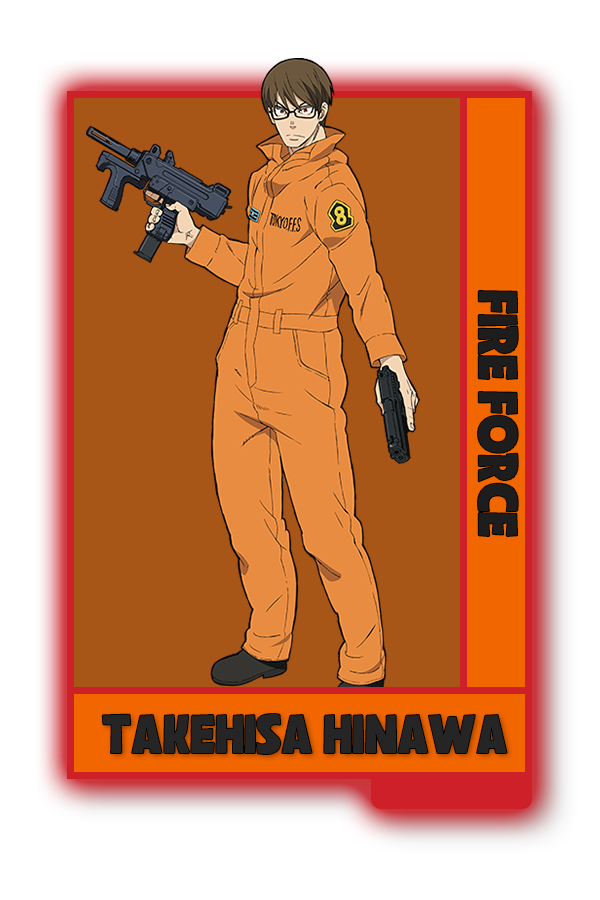
<style>
.page{position:relative;width:600px;height:900px;background:#a85518}
.page>*{position:absolute;margin:0}
.t1{font:69.6px "AristonComicDemo-Regular";color:#1d1d1d}
.t2{font:69.1px "AristonComicDemo-Regular";color:#252525}
</style>
<div class="page">
<p class="t1" style="left:478px;top:291px;width:40px;height:245px;rotate:90deg">FIRE FORCE</p>
<p class="t2" style="left:102px;top:714px;width:405px;height:40px">TAKEHISA HINAWA</p>
</div>
